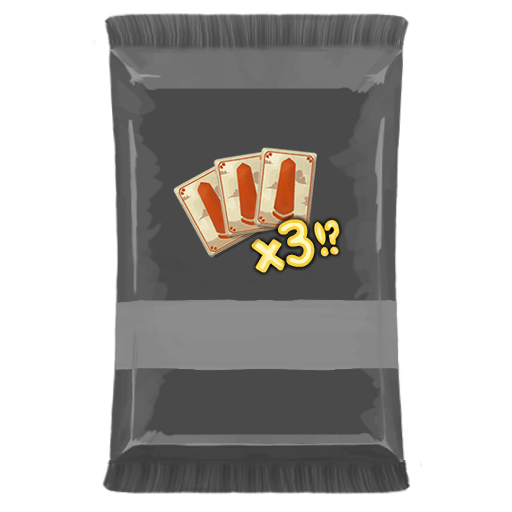
<style>
.page{position:relative;width:512px;height:512px;background:#ffffff}
.page>*{position:absolute;margin:0}
.t1{font:64.5px "ChalkboardSE-Bold";font-weight:bold}
</style>
<div class="page">
<p class="t1" style="left:278px;top:219px;width:37px;height:48px;rotate:-15deg">3</p>
</div>
